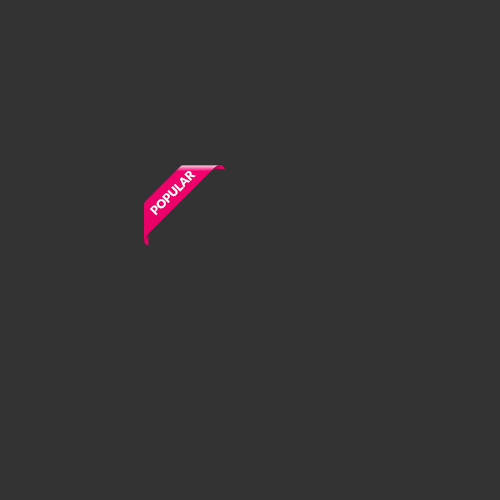
<style>
.page{position:relative;width:500px;height:500px;background:#333333}
.page>*{position:absolute;margin:0}
.t1{font:12px "Lato-Black";color:#ffffff;text-transform:uppercase}
</style>
<div class="page">
<p class="t1" style="left:150px;top:171px;width:46px;height:45px;rotate:-45deg">popular</p>
</div>
